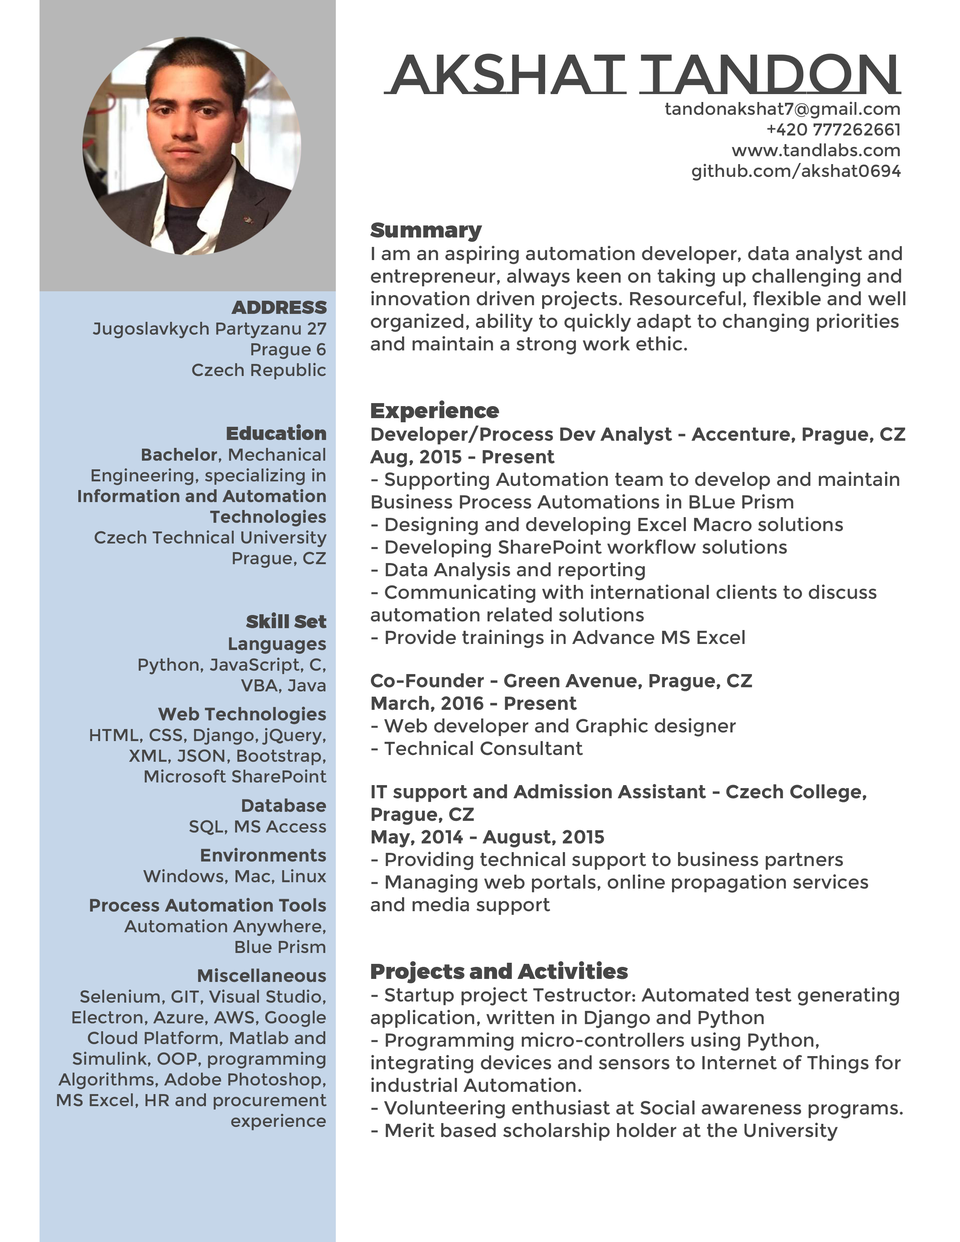
<style>
.page{position:relative;width:960px;height:1242px;background:#ffffff}
.page>*{position:absolute;margin:0}
.t1{font:17.3px "Montserrat-Regular";color:#464646}
.t2{font:56.5px "MontserratSubrayada-Regular";color:#464646}
.t3{font:18.8px "Montserrat-Regular";color:#464646}
.t4{font:22px "Montserrat-Black";color:#464646}
.t5{font:18.8px "Montserrat-Bold";color:#464646}
.t6{font:18.8px "Montserrat-Black";color:#464646}
.t7{font:17.3px "Montserrat-Bold";color:#464646}
.t8{font:18px "Montserrat-Bold";color:#464646}
</style>
<div class="page">
<p class="t1" style="left:384px;top:53px;width:518px;height:128px;text-align:right"><span class="t2">Akshat Tandon<br></span>tandonakshat7@gmail.com<br>+420 777262661<br>www.tandlabs.com<br>github.com/akshat0694</p>
<p class="t3" style="left:370px;top:222px;width:535px;height:919px"><span class="t4">Summary<br></span>I am an aspiring automation developer, data analyst and <br>entrepreneur, always keen on taking up challenging and <br>innovation driven projects. Resourceful, flexible and well <br>organized, ability to quickly adapt to changing priorities and maintain a strong work ethic.<br><br><br><span class="t4">Experience<br></span><span class="t5">Developer/Process Dev Analyst - Accenture, Prague, CZ<br>Aug, 2015 - Present<br></span>- Supporting Automation team to develop and maintain <br>Business Process Automations in BLue Prism<br>- Designing and developing Excel Macro solutions<br>- Developing SharePoint workflow solutions<br>- Data Analysis and reporting<br>- Communicating with international clients to discuss <br>automation related solutions<br>- Provide trainings in Advance MS Excel<br><br><span class="t5">Co-Founder - Green Avenue, Prague, CZ<br>March, 2016 - Present<br></span>- Web developer and Graphic designer<br>- Technical Consultant<br><br><span class="t5">IT support and Admission Assistant - Czech College, <br>Prague, CZ<br>May, 2014 - August, 2015<br></span>- Providing technical support to business partners<br>- Managing web portals, online propagation services and media support<br><br><br><span class="t4">Projects and Activities<br></span>- Startup project Testructor: Automated test generating <br>application, written in Django and Python<br>- Programming micro-controllers using Python,<br>integrating devices and sensors to Internet of Things for <br>industrial Automation.<br>- Volunteering enthusiast at Social awareness programs.<br>- Merit based scholarship holder at the University</p>
<p class="t1" style="left:57px;top:301px;width:270px;height:829px;text-align:right"><span class="t6">ADDRESS</span><br>Jugoslavkych Partyzanu 27<br>Prague 6<br>Czech Republic<br><br><br><span class="t6">Education<br></span><span class="t7">Bachelor</span>, Mechanical <br>Engineering, specializing in <br><span class="t7">Information and Automation Technologies<br></span>Czech Technical University<br>Prague, CZ<br><br><br><span class="t6">Skill Set<br></span><span class="t8">Languages<br></span>Python, JavaScript, C, <br>VBA, Java<br><br><span class="t8">Web Technologies<br></span>HTML, CSS, Django, jQuery, XML, JSON, Bootstrap, <br>Microsoft SharePoint<br><br><span class="t8">Database<br></span>SQL, MS Access<br><br><span class="t8">Environments<br></span>Windows, Mac, Linux<br><br><span class="t8">Process Automation Tools<br></span>Automation Anywhere, <br>Blue Prism<br><br><span class="t8">Miscellaneous<br></span>Selenium, GIT, Visual Studio, Electron, Azure, AWS, Google Cloud Platform, Matlab and Simulink, OOP, programming Algorithms, Adobe Photoshop, MS Excel, HR and procurement <br>experience</p>
</div>
